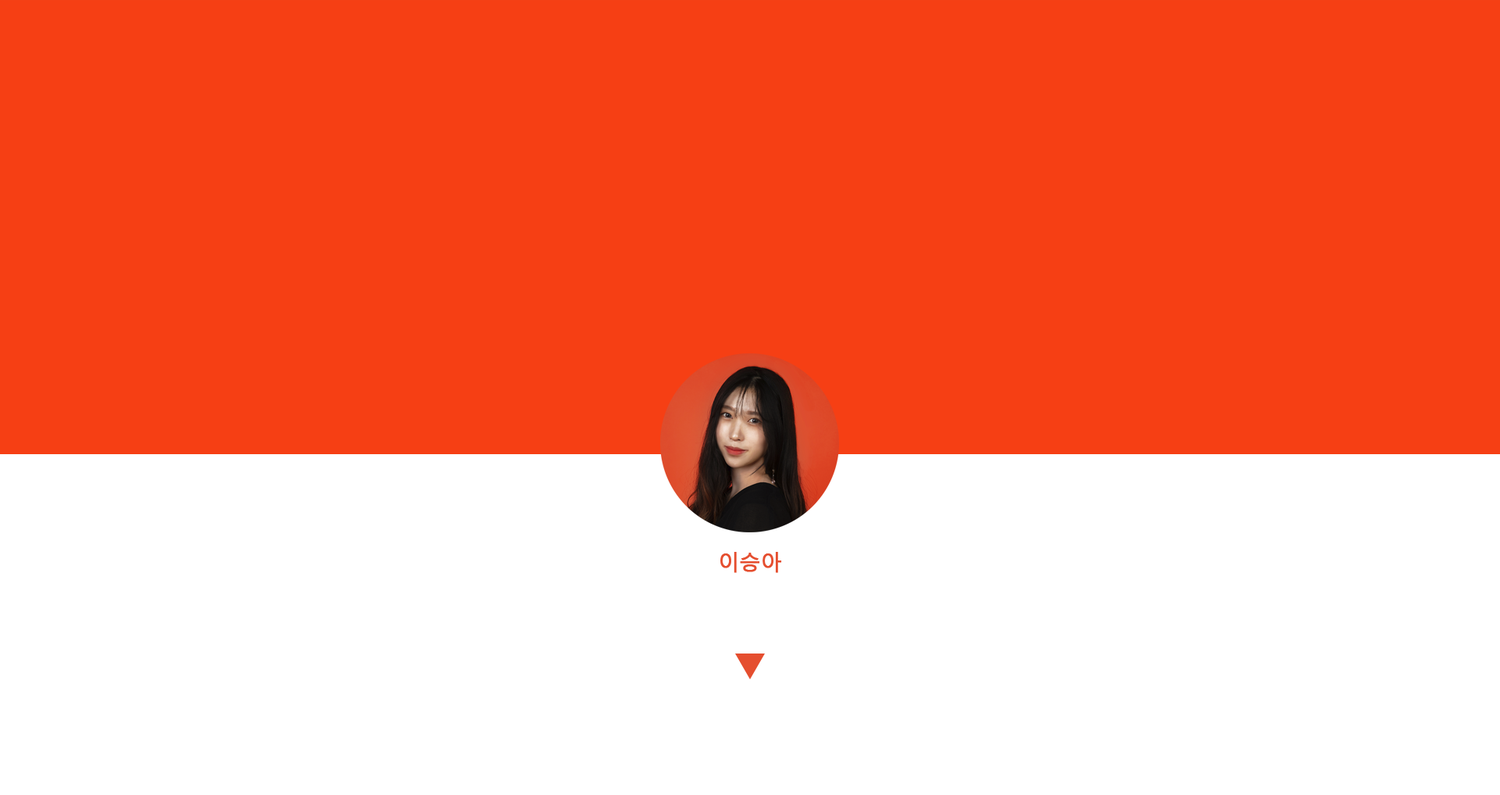
<style>
.page{position:relative;width:1500px;height:795px;background:#f63f14}
.page>*{position:absolute;margin:0}
.t1{font:20.8px "MalgunGothic";color:#e54e2f;font-weight:bold}
</style>
<div class="page">
<p class="t1" style="left:721px;top:552px;width:61px;height:21px">이승아</p>
</div>
